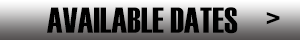
<style>
.page{position:relative;width:300px;height:40px;background:#000000}
.page>*{position:absolute;margin:0}
.t1{font:36px "Haettenschweiler";color:#000000}
</style>
<div class="page">
<p class="t1" style="left:47px;top:7px;width:191px;height:27px">AVAILABLE DATES</p>
<p class="t1" style="left:266px;top:12px;width:14px;height:13px">&gt;</p>
</div>
